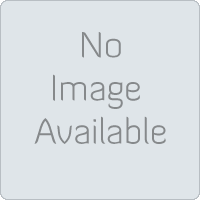
<style>
.page{position:relative;width:200px;height:200px;background:#dfe5e9}
.page>*{position:absolute;margin:0}
.t1{font:36px "DiavloLight-Regular";color:#86898b}
</style>
<div class="page">
<p class="t1" style="left:34px;top:32px;width:132px;height:112px;text-align:center">No<br>Image <br>Available</p>
</div>
